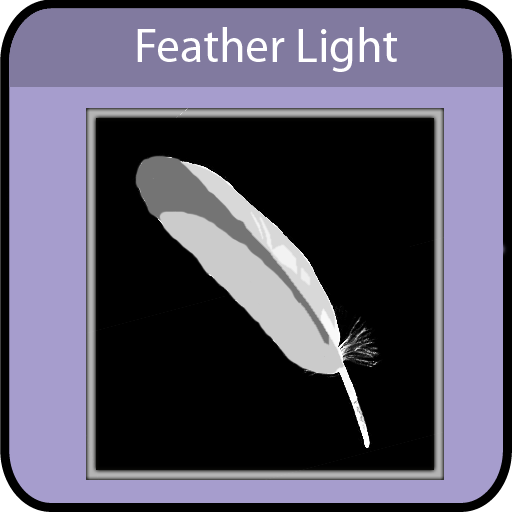
<style>
.page{position:relative;width:512px;height:512px;background:#000000}
.page>*{position:absolute;margin:0}
.t1{font:48px "MyriadPro-Regular";color:#ffffff}
</style>
<div class="page">
<p class="t1" style="left:137px;top:27px;width:260px;height:45px">Feather Light</p>
</div>
